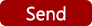
<style>
.page{position:relative;width:92px;height:26px;background:#a10000}
.page>*{position:absolute;margin:0}
.t1{font:17.2px "MicrosoftJhengHeiUIRegular";color:#ffffff}
</style>
<div class="page">
<p class="t1" style="left:26px;top:6px;width:40px;height:15px">Send</p>
</div>
